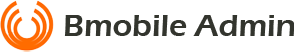
<style>
.page{position:relative;width:294px;height:52px;background:#ffffff}
.page>*{position:absolute;margin:0}
.t1{font:31.9px "ErasITC-Demi";color:#33352e}
</style>
<div class="page">
<p class="t1" style="left:64px;top:15px;width:231px;height:21px">Bmobile Admin</p>
</div>
